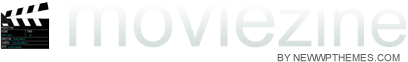
<style>
.page{position:relative;width:408px;height:62px;background:#ffffff}
.page>*{position:absolute;margin:0}
.t1{font:80px "ArialMT";color:#e9ebe0}
.t2{font:72px "ArialMT";color:#e9ebe0}
.t3{font:10px "ArialMT";color:#5e5e5e;text-transform:uppercase}
</style>
<div class="page">
<p class="t1" style="left:69px;top:0px;width:338px;height:48px">movie<span class="t2">zine</span></p>
<p class="t3" style="left:277px;top:54px;width:123px;height:8px">by NewWpThemes.com</p>
</div>
